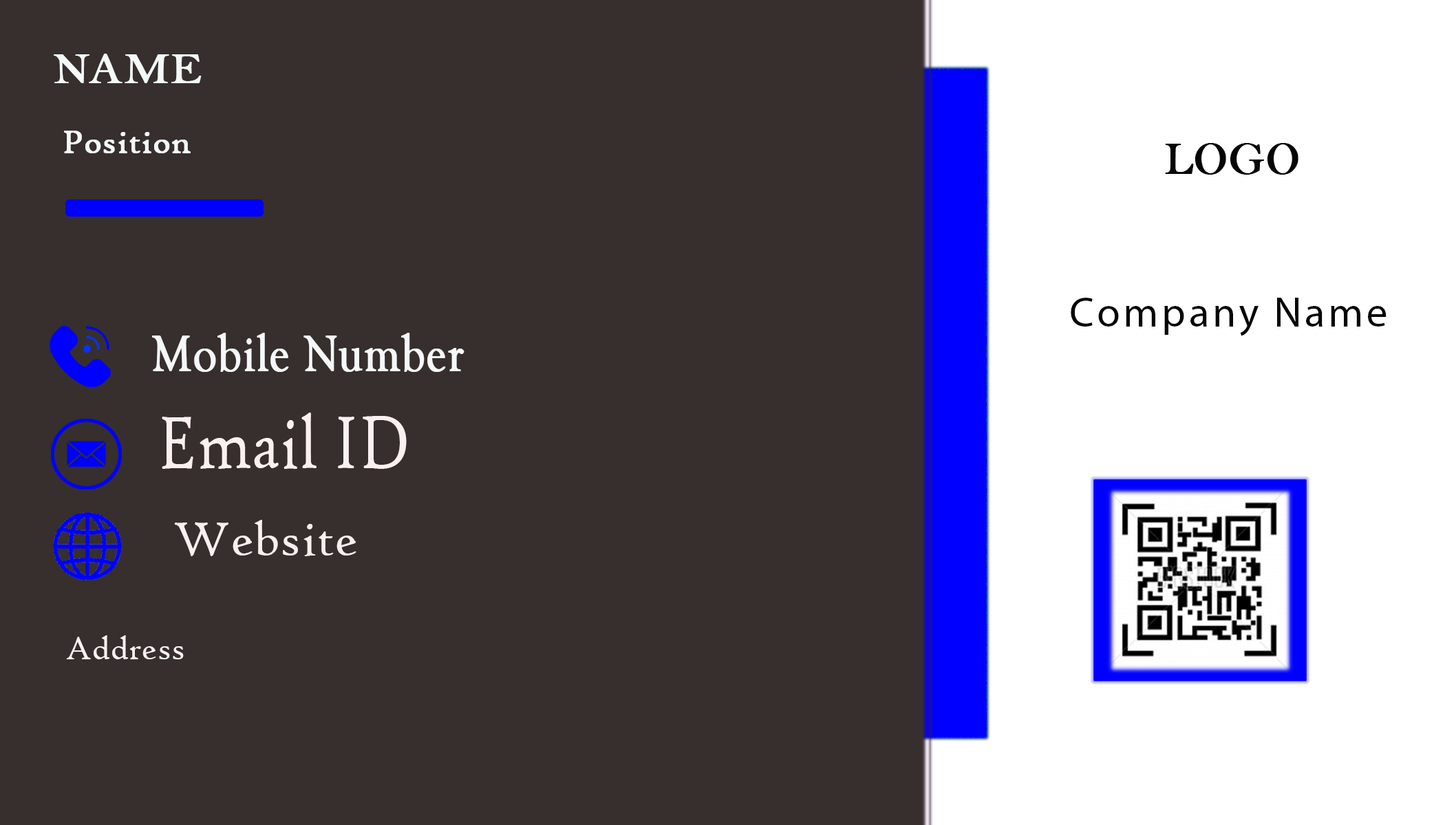
<style>
.page{position:relative;width:1445px;height:825px;background:#362f2d}
.page>*{position:absolute;margin:0}
.t1{font:43.8px "BellMT";letter-spacing:0.01em;color:#f3f8f8;text-transform:uppercase;font-weight:bold;scale:1.1 1}
.t2{font:34.4px "HighTowerText-Reg";letter-spacing:0.01em;color:#f5f8f9;font-weight:bold}
.t3{font:45.9px "BellMT";letter-spacing:0.01em;color:#060606;text-transform:uppercase;font-weight:bold}
.t4{font:42.3px "MyriadPro-Regular";letter-spacing:0.075em;color:#050505}
.t5{font:53px "GoudyOldStyleT-Regular";letter-spacing:0.01em;color:#f5f8f9;font-weight:bold;scale:0.86 1}
.t6{font:79.7px "HighTowerText-Reg";letter-spacing:0.01em;color:#faf0f0;scale:0.79 1}
.t7{font:51.6px "HighTowerText-Reg";letter-spacing:0.01em;color:#faf0f0}
.t8{font:34.4px "HighTowerText-Reg";letter-spacing:0.01em;color:#fbf3f3}
</style>
<div class="page">
<p class="t1" style="left:54px;top:54px;width:148px;height:29px">Name</p>
<p class="t2" style="left:64px;top:131px;width:127px;height:22px">Position</p>
<p class="t3" style="left:1165px;top:143px;width:133px;height:32px">Logo</p>
<p class="t4" style="left:1070px;top:298px;width:316px;height:38px">Company Name</p>
<p class="t5" style="left:152px;top:333px;width:312px;height:39px">Mobile Number</p>
<p class="t6" style="left:162px;top:413px;width:245px;height:56px">Email ID</p>
<p class="t7" style="left:174px;top:520px;width:182px;height:37px">Website</p>
<p class="t8" style="left:66px;top:636px;width:118px;height:24px">Address</p>
</div>
